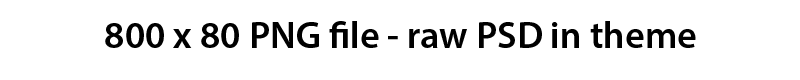
<style>
.page{position:relative;width:800px;height:80px;background:#ffffff}
.page>*{position:absolute;margin:0}
.t1{font:38px "MyriadPro-Semibold";color:#000000}
</style>
<div class="page">
<p class="t1" style="left:105px;top:21px;width:591px;height:27px">800 x 80 PNG file - raw PSD in theme folder.</p>
</div>
